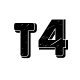
<style>
.page{position:relative;width:80px;height:80px;background:#ffffff}
.page>*{position:absolute;margin:0}
.t1{font:60px "SKETCHUPFREETRIAL";color:#000000}
</style>
<div class="page">
<p class="t1" style="left:14px;top:19px;width:54px;height:40px">T4</p>
</div>
